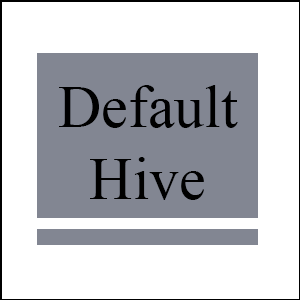
<style>
.page{position:relative;width:300px;height:300px;background:#ffffff}
.page>*{position:absolute;margin:0}
.t1{font:60px "TimesNewRomanPSMT";color:#000000}
</style>
<div class="page">
<p class="t1" style="left:59px;top:85px;width:179px;height:115px;text-align:center">Default<br>Hive</p>
</div>
